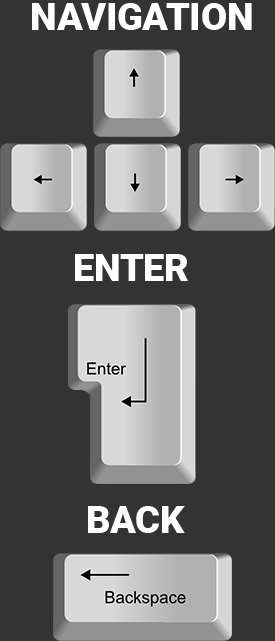
<style>
.page{position:relative;width:275px;height:641px;background:#333333}
.page>*{position:absolute;margin:0}
.t1{font:37.5px "Roboto-Black";color:#ffffff}
</style>
<div class="page">
<p class="t1" style="left:32px;top:3px;width:220px;height:27px">NAVIGATION</p>
<p class="t1" style="left:75px;top:254px;width:113px;height:27px">ENTER</p>
<p class="t1" style="left:88px;top:506px;width:97px;height:27px">BACK</p>
</div>
